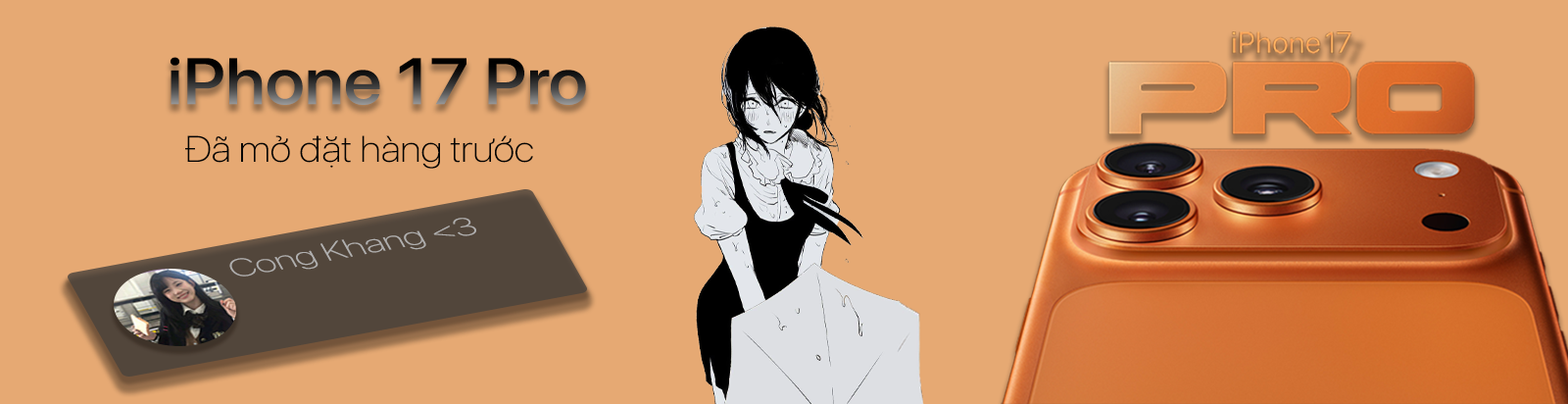
<style>
.page{position:relative;width:1568px;height:404px;background:#e6a973}
.page>*{position:absolute;margin:0}
.t1{font:65.2px "SFProDisplay-Medium";letter-spacing:0.002em;scale:1.1 1}
.t2{font:36.5px "SFProDisplay-Thin";letter-spacing:0.002em;color:#040404;scale:1.1 1}
.t3{font:27.1px "SFProDisplay-Thin";letter-spacing:0.002em;color:#afafaf;scale:1.45 1}
</style>
<div class="page">
<p class="t1" style="left:170px;top:57px;width:416px;height:48px">iPhone 17 Pro</p>
<p class="t2" style="left:185px;top:135px;width:348px;height:34px">Đã mở đặt hàng trước</p>
<p class="t3" style="left:229px;top:218px;width:247px;height:58px;rotate:-10deg">Cong Khang &lt;3</p>
</div>
